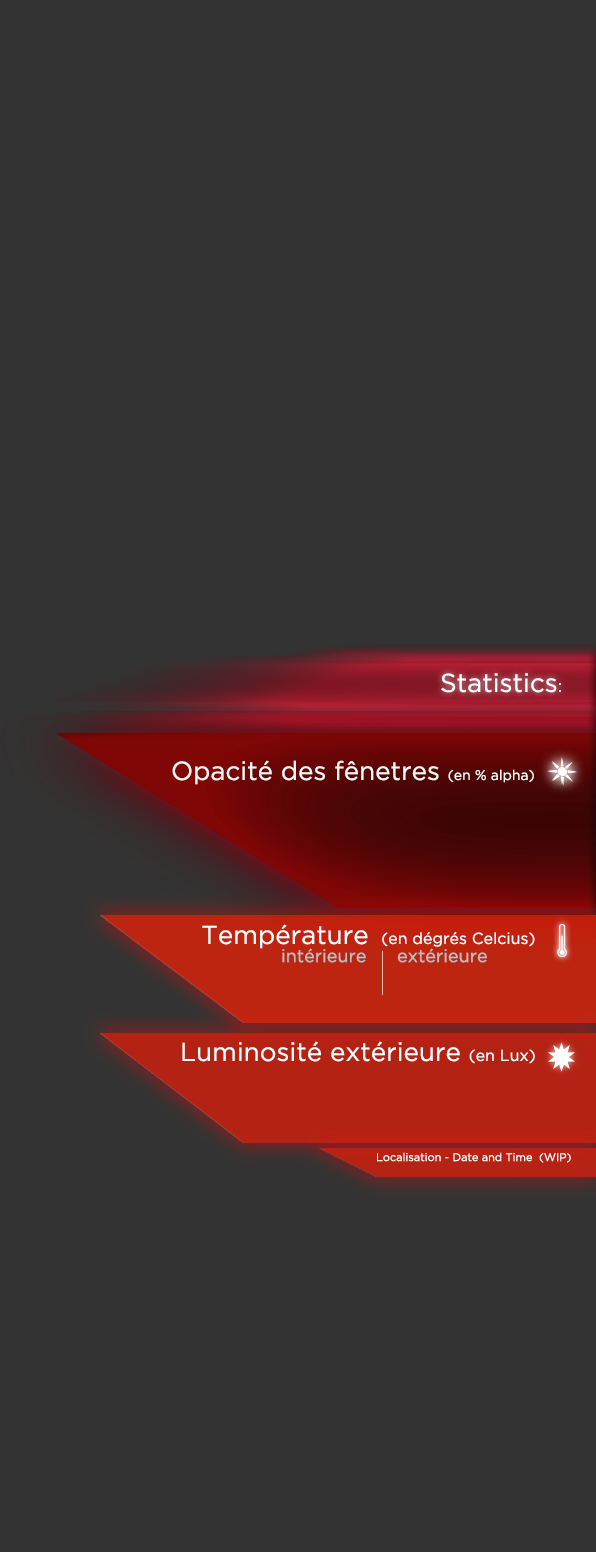
<style>
.page{position:relative;width:596px;height:1552px;background:#333333}
.page>*{position:absolute;margin:0}
.t1{font:16px "GothamBook";color:#ffffff}
.t2{font:26px "GothamBook";color:#ffffff}
.t3{font:18px "GothamBook";color:#bebebe}
.t4{font:11px "GothamBook";color:#ffffff}
</style>
<div class="page">
<p class="t1" style="left:202px;top:924px;width:333px;height:25px"><span class="t2">Température </span> (en dégrés Celcius)</p>
<p class="t3" style="left:282px;top:948px;width:84px;height:15px">intérieure</p>
<p class="t3" style="left:397px;top:948px;width:90px;height:15px">extérieure</p>
<p class="t2" style="left:182px;top:1041px;width:353px;height:23px">Luminosité extérieure <span class="t1">(en Lux)</span></p>
<p class="t4" style="left:377px;top:1152px;width:194px;height:11px">Localisation - Date and Time  (WIP)</p>
</div>
